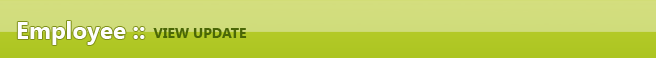
<style>
.page{position:relative;width:656px;height:58px}
.page>*{position:absolute;margin:0}
.t1{font:24px "SegoeUI-Bold";color:#fefefe}
.t2{font:14px "SegoeUI-Bold";color:#4a6706}
</style>
<div class="page">
<p class="t1" style="left:17px;top:21px;width:128px;height:24px">Employee ::</p>
<p class="t2" style="left:153px;top:28px;width:94px;height:10px">VIEW UPDATE</p>
</div>
